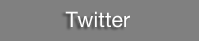
<style>
.page{position:relative;width:199px;height:41px;background:#808080}
.page>*{position:absolute;margin:0}
.t1{font:21.4px "HelveticaNeue";color:#fefefe}
</style>
<div class="page">
<p class="t1" style="left:65px;top:11px;width:65px;height:17px">Twitter</p>
</div>
